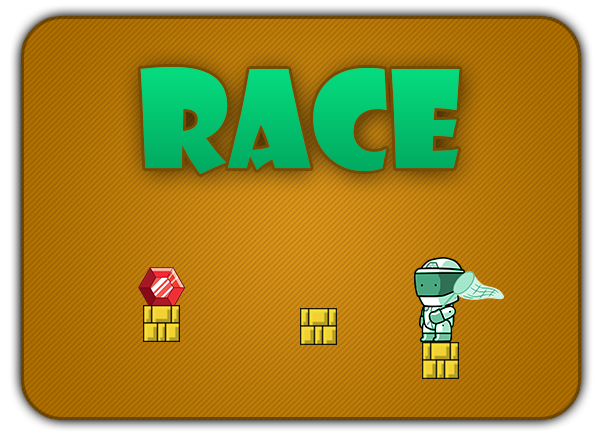
<style>
.page{position:relative;width:601px;height:436px}
.page>*{position:absolute;margin:0}
.t1{font:132.5px "ShowcardGothic-Reg";color:#03c570}
</style>
<div class="page">
<p class="t1" style="left:140px;top:67px;width:320px;height:107px">race</p>
</div>
